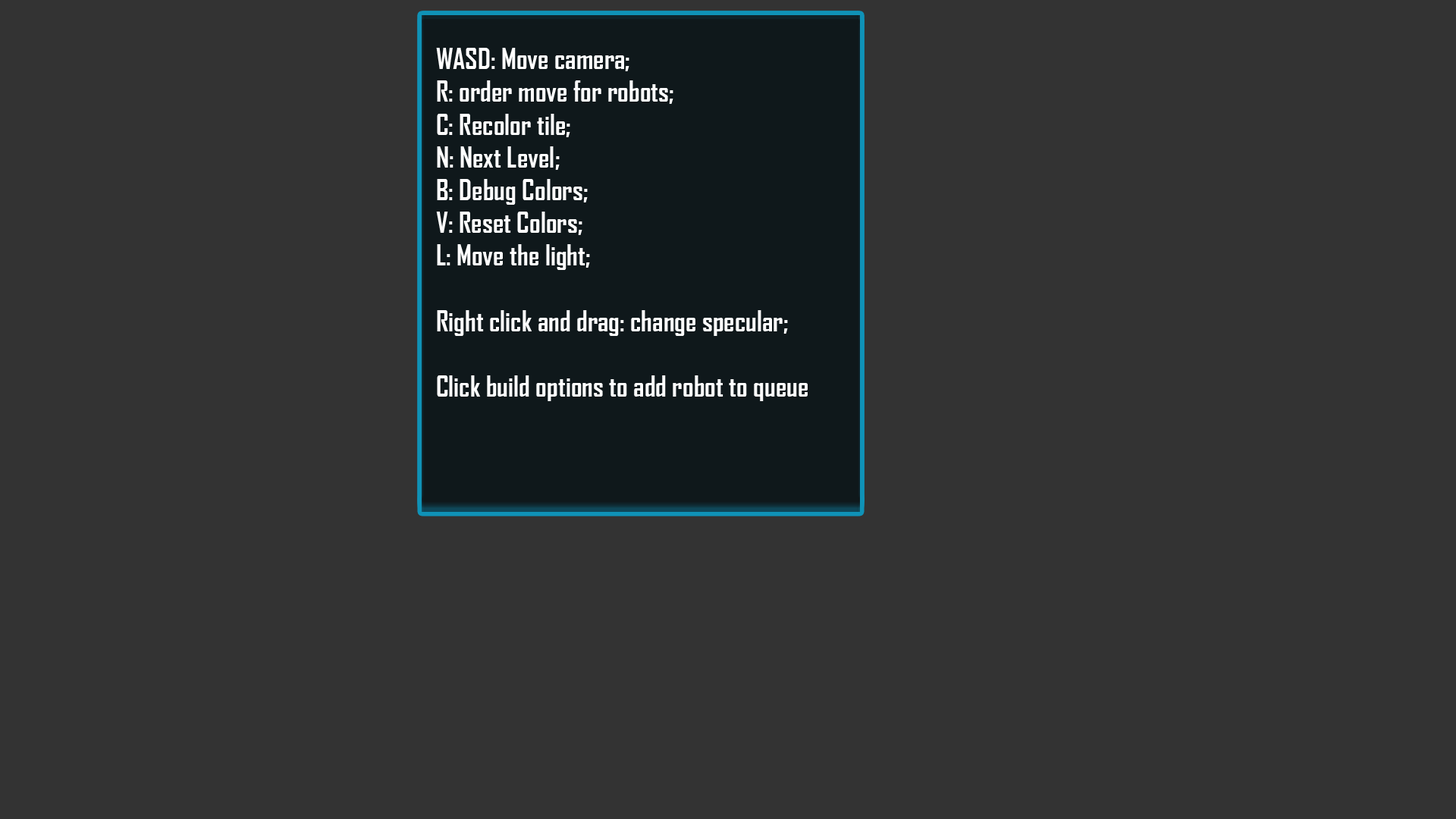
<style>
.page{position:relative;width:1456px;height:819px;background:#333333}
.page>*{position:absolute;margin:0}
.t1{font:27.3px "AgencyFB-Bold";color:#ffffff}
</style>
<div class="page">
<p class="t1" style="left:436px;top:48px;width:372px;height:353px">WASD: Move camera;<br>R: order move for robots;<br>C: Recolor tile;<br>N: Next Level;<br>B: Debug Colors;<br>V: Reset Colors;<br>L: Move the light;<br><br>Right click and drag: change specular;<br><br>Click build options to add robot to queue</p>
</div>
